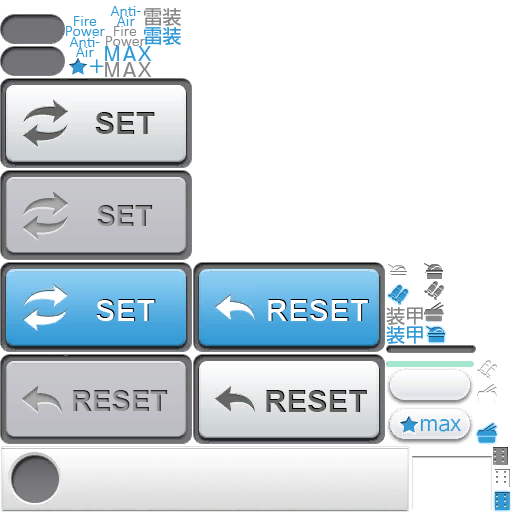
<style>
.page{position:relative;width:512px;height:512px;background:#ffffff}
.page>*{position:absolute;margin:0}
.t1{font:16px/10px "Calibri-Light";color:#319ad6}
.t2{font:16px/10px "Calibri-Light";color:#898889}
.t3{font:31px "Arial-BoldMT";color:#636563}
.t4{font:29px "Arial-BoldMT"}
.t5{font:31px "Arial-BoldMT";color:#ffffff}
</style>
<div class="page">
<p class="t1" style="left:110px;top:6px;width:31px;height:20px;text-align:center">Anti-<br>Air</p>
<p class="t1" style="left:66px;top:16px;width:39px;height:20px;text-align:center">Fire<br>Power</p>
<p class="t2" style="left:106px;top:26px;width:39px;height:20px;text-align:center">Fire<br>Power</p>
<p class="t1" style="left:69px;top:37px;width:31px;height:20px;text-align:center">Anti-<br>Air</p>
<p class="t3" style="left:95px;top:112px;width:60px;height:22px">SET</p>
<p class="t4" style="left:97px;top:205px;width:56px;height:21px">SET</p>
<p class="t5" style="left:96px;top:299px;width:60px;height:22px">SET</p>
<p class="t5" style="left:268px;top:299px;width:101px;height:22px">RESET</p>
<p class="t4" style="left:73px;top:390px;width:95px;height:21px">RESET</p>
<p class="t3" style="left:266px;top:390px;width:101px;height:22px">RESET</p>
</div>
